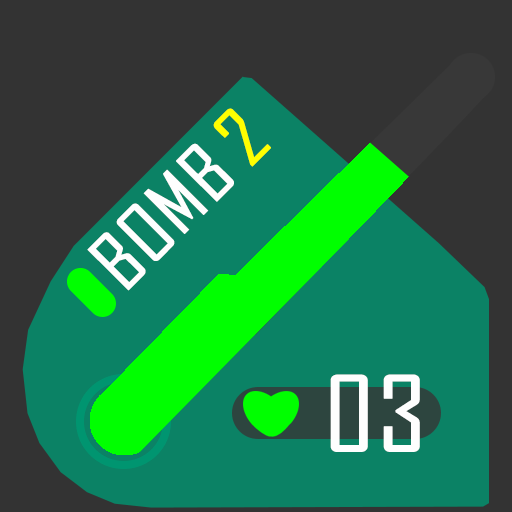
<style>
.page{position:relative;width:512px;height:512px;background:#333333}
.page>*{position:absolute;margin:0}
.t1{font:75px "AgencyFB-Regular";color:#ffff00;font-weight:bold;scale:1.15 1}
.t2{font:75px "AgencyFB-Regular";color:#fefefe;font-weight:bold;scale:1.15 1}
.t3{font:100px "AgencyFB-Regular";color:#fefefe;font-weight:bold;scale:1.15 1}
</style>
<div class="page">
<p class="t1" style="left:213px;top:108px;width:58px;height:59px;rotate:-45deg">2</p>
<p class="t2" style="left:87px;top:143px;width:147px;height:148px;rotate:-45deg">BOMB</p>
<p class="t3" style="left:330px;top:374px;width:90px;height:78px">03</p>
</div>
